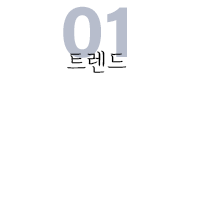
<style>
.page{position:relative;width:200px;height:200px;background:#ffffff}
.page>*{position:absolute;margin:0}
.t1{font:75px "AcuminConcept-Bold";color:#b7bdcc}
.t2{font:25px "Cafe24Oneprettynight";color:#000000}
</style>
<div class="page">
<p class="t1" style="left:63px;top:6px;width:64px;height:52px">01</p>
<p class="t2" style="left:67px;top:50px;width:60px;height:23px">트렌드</p>
</div>
